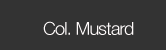
<style>
.page{position:relative;width:166px;height:50px;background:#333333}
.page>*{position:absolute;margin:0}
.t1{font:17.9px "HelveticaNeue-Light";letter-spacing:-0.04em;color:#fffbfb}
.t2{font:19.8px "HelveticaNeue-Light";letter-spacing:-0.04em;color:#fffbfb}
</style>
<div class="page">
<p class="t1" style="left:43px;top:21px;width:91px;height:14px"><span class="t2"><br>  </span>Col. Mustard</p>
</div>
